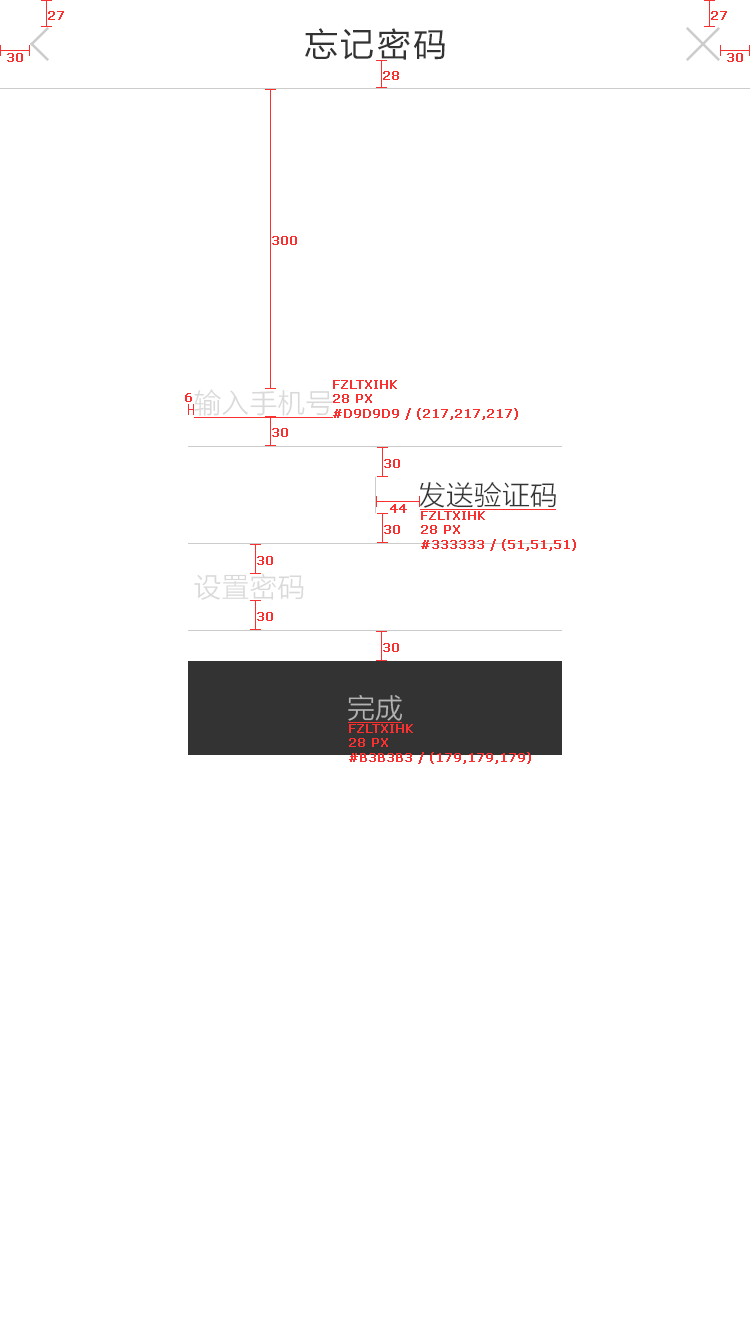
<style>
.page{position:relative;width:750px;height:1331px;background:#ffffff}
.page>*{position:absolute;margin:0}
.t1{font:12px "Verdana";color:#f83030;font-weight:bold}
.t2{font:34px "FZLTHK--GBK1-0";letter-spacing:0.06em;color:#333333}
.t3{font:28px "FZLTXIHK--GBK1-0";color:#d9d9d9}
.t4{font:28px "FZLTXIHK--GBK1-0";color:#333333}
.t5{font:28px "FZLTXIHK--GBK1-0";color:#b3b3b3}
</style>
<div class="page">
<p class="t1" style="left:48px;top:11px;width:16px;height:9px">27</p>
<p class="t1" style="left:711px;top:11px;width:16px;height:9px">27</p>
<p class="t2" style="left:305px;top:28px;width:140px;height:32px">忘记密码</p>
<p class="t1" style="left:7px;top:53px;width:16px;height:9px">30</p>
<p class="t1" style="left:727px;top:53px;width:16px;height:9px">30</p>
<p class="t1" style="left:383px;top:71px;width:16px;height:9px">28</p>
<p class="t1" style="left:272px;top:236px;width:25px;height:9px">300</p>
<p class="t3" style="left:194px;top:389px;width:139px;height:27px">输入手机号</p>
<p class="t1" style="left:333px;top:380px;width:185px;height:40px">FZLTXIHK <br>28 PX<br>#D9D9D9 / (217,217,217)</p>
<p class="t1" style="left:185px;top:393px;width:7px;height:9px">6</p>
<p class="t1" style="left:272px;top:428px;width:16px;height:9px">30</p>
<p class="t1" style="left:384px;top:459px;width:16px;height:9px">30</p>
<p class="t4" style="left:420px;top:482px;width:136px;height:26px">发送验证码</p>
<p class="t1" style="left:390px;top:504px;width:17px;height:9px">44</p>
<p class="t1" style="left:421px;top:511px;width:155px;height:40px">FZLTXIHK <br>28 PX<br>#333333 / (51,51,51)</p>
<p class="t1" style="left:384px;top:525px;width:16px;height:9px">30</p>
<p class="t1" style="left:257px;top:556px;width:16px;height:9px">30</p>
<p class="t3" style="left:194px;top:574px;width:110px;height:26px">设置密码</p>
<p class="t1" style="left:257px;top:612px;width:16px;height:9px">30</p>
<p class="t1" style="left:383px;top:643px;width:16px;height:9px">30</p>
<p class="t5" style="left:348px;top:695px;width:54px;height:26px">完成</p>
<p class="t1" style="left:349px;top:724px;width:182px;height:40px">FZLTXIHK <br>28 PX<br>#B3B3B3 / (179,179,179)</p>
</div>
